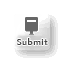
<style>
.page{position:relative;width:64px;height:64px;background:#ffffff}
.page>*{position:absolute;margin:0}
.t1{font:9px "AmiraParadiso";letter-spacing:0.05em;color:#424242}
</style>
<div class="page">
<p class="t1" style="left:16px;top:38px;width:32px;height:7px">Submit</p>
</div>
